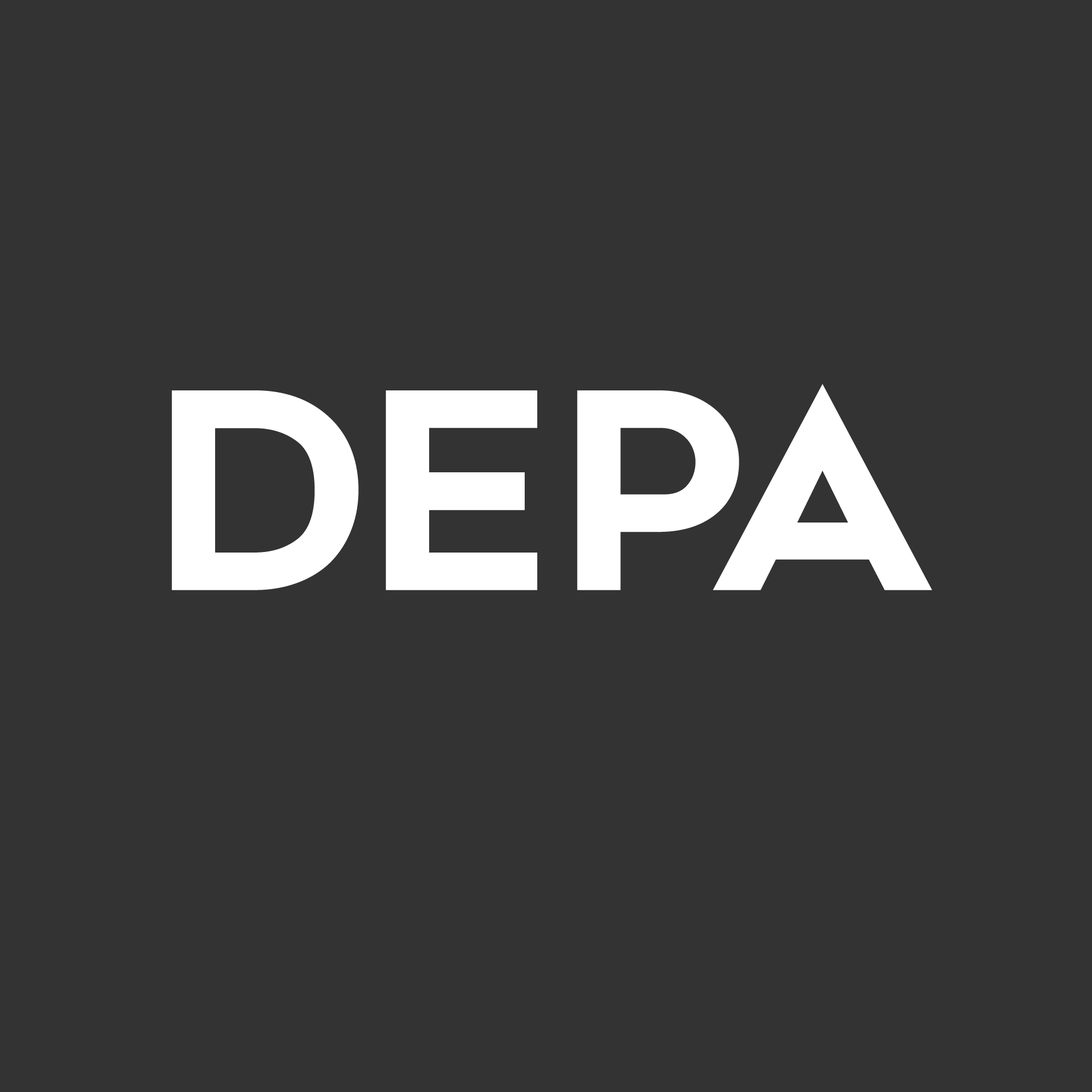
<style>
.page{position:relative;width:1092px;height:1092px;background:#333333}
.page>*{position:absolute;margin:0}
.t1{font:273px "Renogare-Regular";color:#ffffff}
</style>
<div class="page">
<p class="t1" style="left:171px;top:384px;width:761px;height:206px">DEPA</p>
</div>
